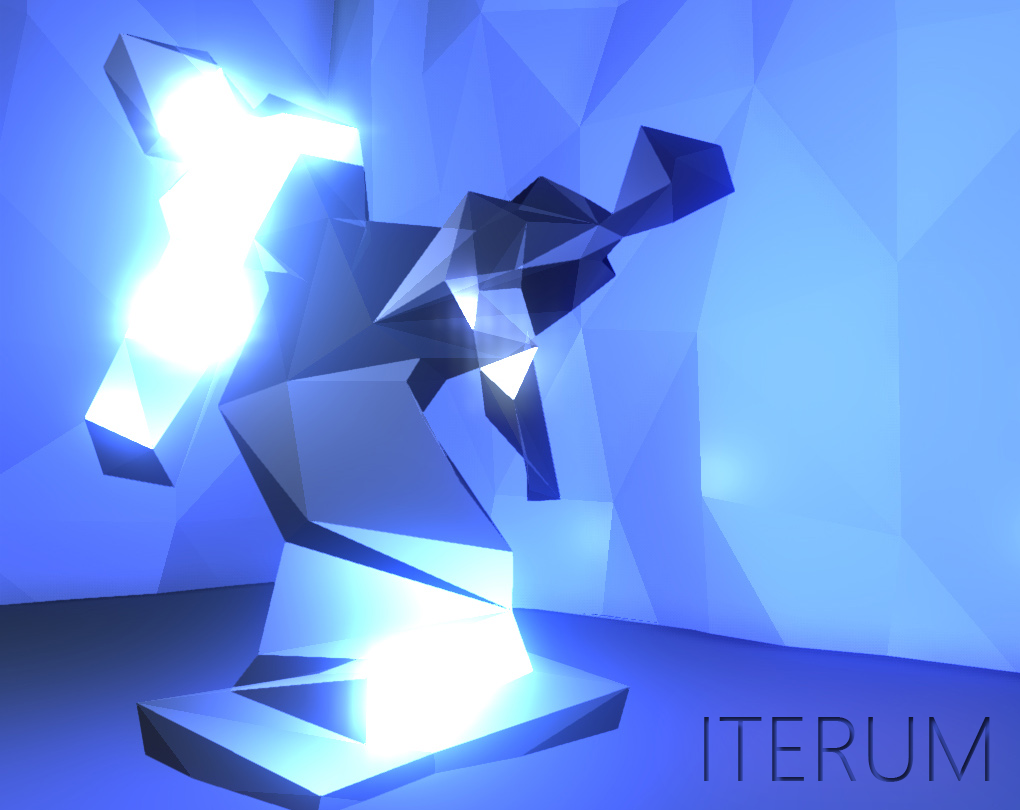
<style>
.page{position:relative;width:1020px;height:810px}
.page>*{position:absolute;margin:0}
.t1{font:92px "SegoeUI-Light"}
</style>
<div class="page">
<p class="t1" style="left:704px;top:717px;width:286px;height:65px">ITERUM</p>
</div>
